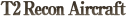
<style>
.page{position:relative;width:127px;height:19px;background:#ffffff}
.page>*{position:absolute;margin:0}
.t1{font:18px "RyuminPro-ExBold";letter-spacing:-0.105em;color:#4a3f32;font-weight:bold;scale:0.9 1}
</style>
<div class="page">
<p class="t1" style="left:0px;top:1px;width:126px;height:15px">T2 Recon Aircraft</p>
</div>
